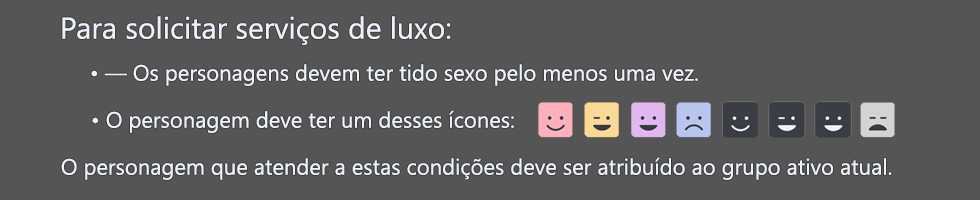
<style>
.page{position:relative;width:980px;height:200px;background:#555555}
.page>*{position:absolute;margin:0}
.t1{font:30px "YuGothicUI-Regular";color:#edf2fa}
.t2{font:22px "YuGothicUI-Regular";color:#edf2fa}
</style>
<div class="page">
<p class="t1" style="left:62px;top:16px;width:389px;height:29px">Para solicitar serviços de luxo:</p>
<p class="t2" style="left:91px;top:64px;width:607px;height:22px">• — Os personagens devem ter tido sexo pelo menos uma vez.</p>
<p class="t2" style="left:92px;top:110px;width:422px;height:23px">• O personagem deve ter um desses ícones:</p>
<p class="t2" style="left:61px;top:157px;width:831px;height:23px">O personagem que atender a estas condições deve ser atribuído ao grupo ativo atual.</p>
</div>
